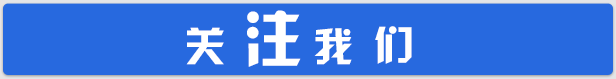
<style>
.page{position:relative;width:616px;height:79px;background:#2769df}
.page>*{position:absolute;margin:0}
.t1{font:60.7px "JLinXin";color:#ffffff}
.t2{font:40px "JLinXin";color:#ffffff}
</style>
<div class="page">
<p class="t1" style="left:247px;top:10px;width:54px;height:57px">注</p>
<p class="t2" style="left:186px;top:27px;width:38px;height:38px">关</p>
<p class="t2" style="left:314px;top:28px;width:38px;height:37px">我</p>
<p class="t2" style="left:375px;top:26px;width:37px;height:38px">们</p>
</div>
